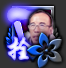
<style>
.page{position:relative;width:66px;height:68px}
.page>*{position:absolute;margin:0}
.t1{font:30.4px "STXingkai";font-weight:bold}
</style>
<div class="page">
<p class="t1" style="left:6px;top:36px;width:30px;height:25px">拴</p>
</div>
